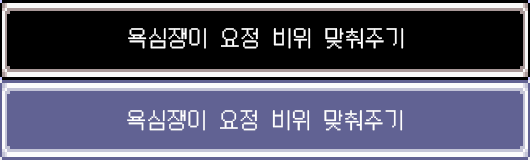
<style>
.page{position:relative;width:530px;height:160px;background:#616293}
.page>*{position:absolute;margin:0}
.t1{font:23.9px "PFStardust";color:#ffffff}
</style>
<div class="page">
<p class="t1" style="left:128px;top:28px;width:276px;height:21px">욕심쟁이 요정 비위 맞춰주기</p>
<p class="t1" style="left:127px;top:110px;width:276px;height:21px">욕심쟁이 요정 비위 맞춰주기</p>
</div>
